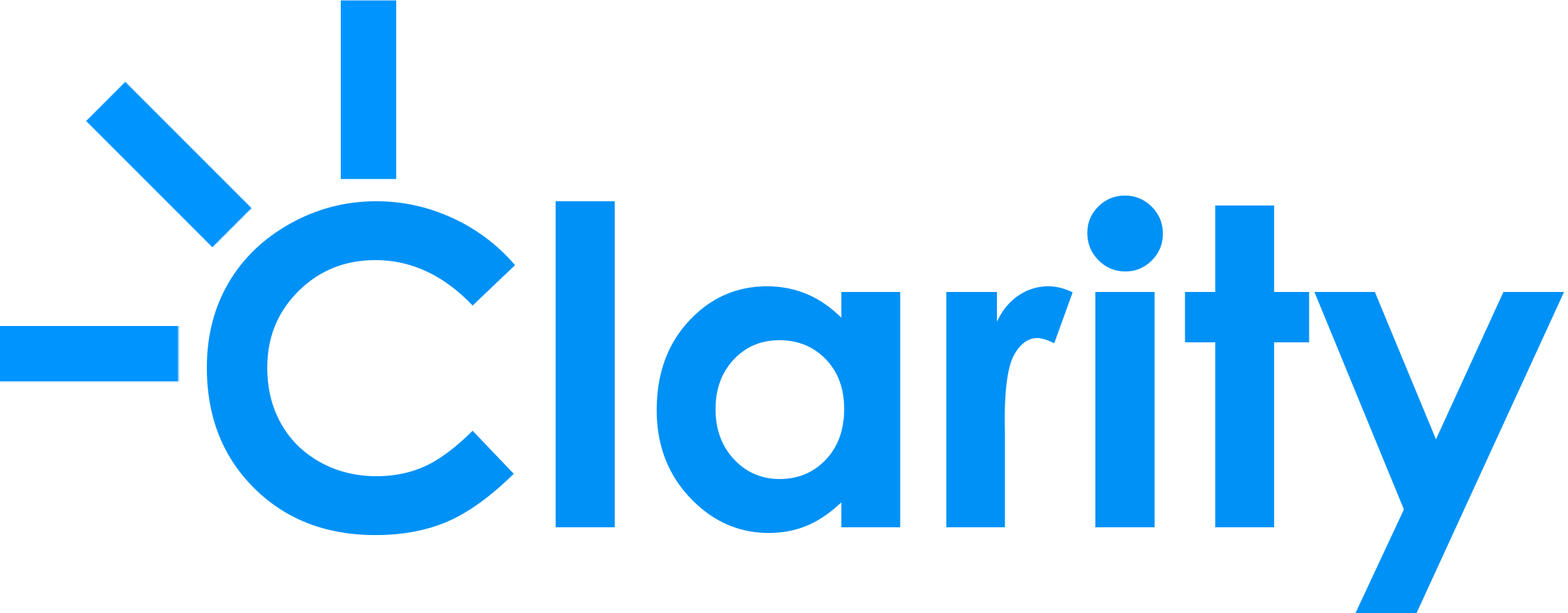
<style>
.page{position:relative;width:1568px;height:613px;background:#ffffff}
.page>*{position:absolute;margin:0}
.t1{font:442.8px "CenturyGothic-Bold";color:#0091f6}
</style>
<div class="page">
<p class="t1" style="left:206px;top:196px;width:1358px;height:417px">Clarity</p>
</div>
